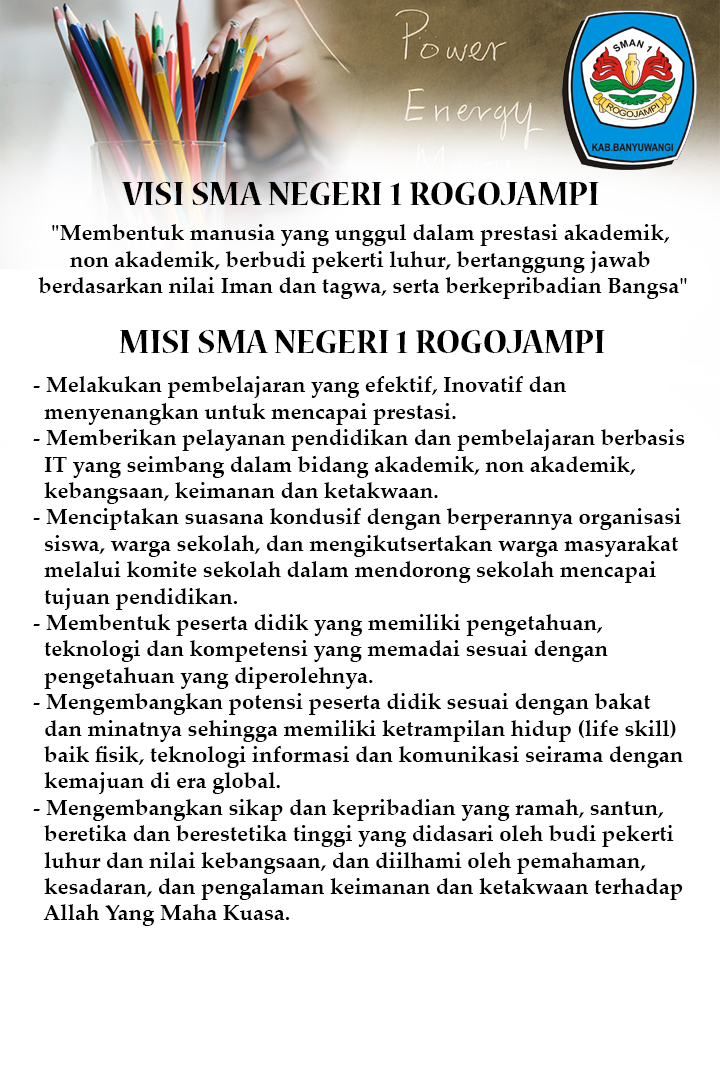
<style>
.page{position:relative;width:720px;height:1080px;background:#ffffff}
.page>*{position:absolute;margin:0}
.t1{font:35.9px "NuevaStd-Bold";color:#000000}
.t2{font:22px "PalatinoLinotype-Bold";color:#000000}
</style>
<div class="page">
<p class="t1" style="left:122px;top:182px;width:477px;height:23px">VISI SMA NEGERI 1 ROGOJAMPI</p>
<p class="t2" style="left:38px;top:224px;width:649px;height:75px;text-align:center">"Membentuk manusia yang unggul dalam prestasi akademik, <br>non akademik, berbudi pekerti luhur, bertanggung jawab <br>berdasarkan nilai Iman dan tagwa, serta berkepribadian Bangsa"</p>
<p class="t1" style="left:119px;top:330px;width:486px;height:23px">MISI SMA NEGERI 1 ROGOJAMPI</p>
<p class="t2" style="left:33px;top:376px;width:652px;height:550px">- Melakukan pembelajaran yang efektif, Inovatif dan <br>  menyenangkan untuk mencapai prestasi.<br>- Memberikan pelayanan pendidikan dan pembelajaran berbasis <br>  IT yang seimbang dalam bidang akademik, non akademik, <br>  kebangsaan, keimanan dan ketakwaan.<br>- Menciptakan suasana kondusif dengan berperannya organisasi <br>  siswa, warga sekolah, dan mengikutsertakan warga masyarakat <br>  melalui komite sekolah dalam mendorong sekolah mencapai <br>  tujuan pendidikan.<br>- Membentuk peserta didik yang memiliki pengetahuan, <br>  teknologi dan kompetensi yang memadai sesuai dengan <br>  pengetahuan yang diperolehnya.<br>- Mengembangkan potensi peserta didik sesuai dengan bakat <br>  dan minatnya sehingga memiliki ketrampilan hidup (life skill) <br>  baik fisik, teknologi informasi dan komunikasi seirama dengan <br>  kemajuan di era global.<br>- Mengembangkan sikap dan kepribadian yang ramah, santun, <br>  beretika dan berestetika tinggi yang didasari oleh budi pekerti <br>  luhur dan nilai kebangsaan, dan diilhami oleh pemahaman, <br>  kesadaran, dan pengalaman keimanan dan ketakwaan terhadap <br>  Allah Yang Maha Kuasa.</p>
</div>
